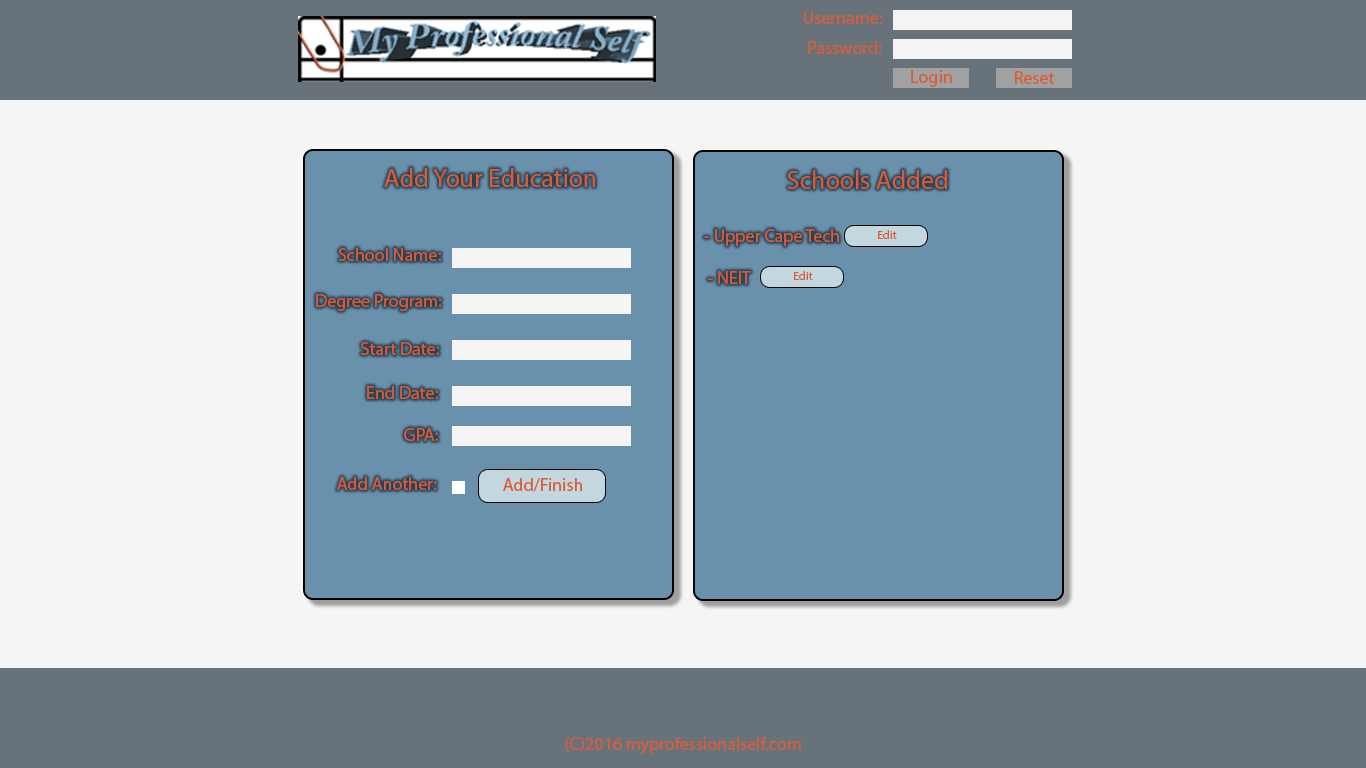
<style>
.page{position:relative;width:1366px;height:768px;background:#f5f5f5}
.page>*{position:absolute;margin:0}
.t1{font:18px "MyriadPro-Regular";color:#d75c37}
.t2{font:26px "MyriadPro-Regular";color:#d75c37}
.t3{font:11.7px "MyriadPro-Regular";color:#d75c37}
</style>
<div class="page">
<p class="t1" style="left:804px;top:11px;width:78px;height:13px">Username:</p>
<p class="t1" style="left:808px;top:41px;width:74px;height:13px">Password:</p>
<p class="t1" style="left:911px;top:70px;width:41px;height:17px">Login</p>
<p class="t1" style="left:1015px;top:71px;width:40px;height:13px">Reset</p>
<p class="t2" style="left:384px;top:168px;width:211px;height:19px">Add Your Education</p>
<p class="t2" style="left:787px;top:170px;width:160px;height:19px">Schools Added</p>
<p class="t1" style="left:704px;top:229px;width:135px;height:17px">- Upper Cape Tech</p>
<p class="t3" style="left:878px;top:230px;width:19px;height:9px">Edit</p>
<p class="t1" style="left:338px;top:248px;width:103px;height:13px">School Name:</p>
<p class="t1" style="left:708px;top:271px;width:43px;height:13px">- NEIT</p>
<p class="t3" style="left:794px;top:271px;width:19px;height:9px">Edit</p>
<p class="t1" style="left:316px;top:294px;width:126px;height:17px">Degree Program:</p>
<p class="t1" style="left:361px;top:342px;width:78px;height:13px;text-align:center">Start Date:<br>StartSt:</p>
<p class="t1" style="left:367px;top:386px;width:71px;height:13px">End Date:</p>
<p class="t1" style="left:404px;top:428px;width:34px;height:13px">GPA:</p>
<p class="t1" style="left:337px;top:477px;width:100px;height:13px">Add Another:</p>
<p class="t1" style="left:503px;top:478px;width:79px;height:14px">Add/Finish</p>
<p class="t1" style="left:565px;top:737px;width:236px;height:17px">(C)2016 myprofessionalself.com</p>
</div>
